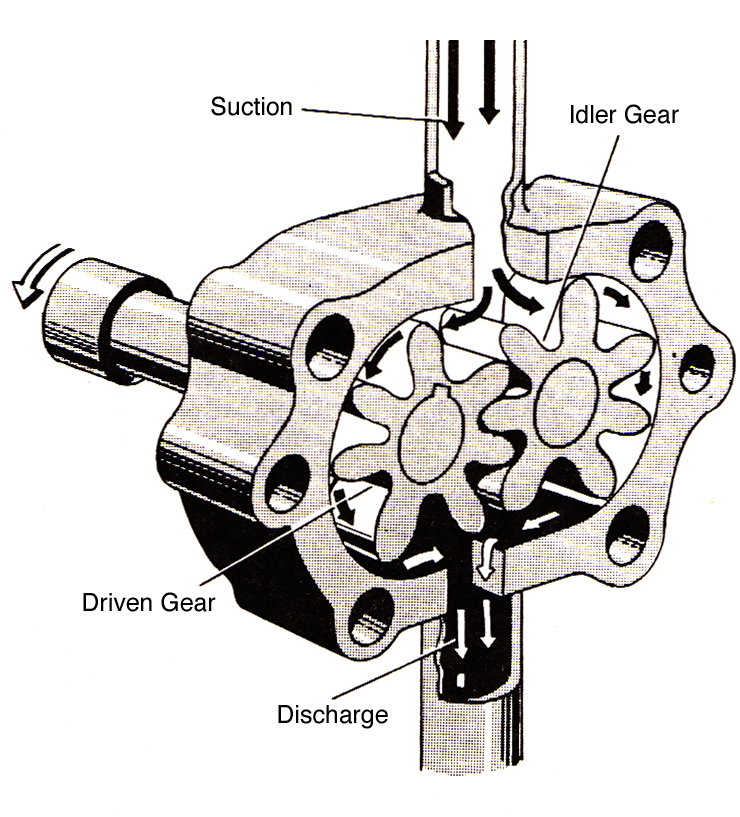
<style>
.page{position:relative;width:740px;height:817px;background:#ffffff}
.page>*{position:absolute;margin:0}
.t1{font:24.9px "Helvetica";color:#000000}
</style>
<div class="page">
<p class="t1" style="left:211px;top:96px;width:81px;height:20px">Suction</p>
<p class="t1" style="left:571px;top:104px;width:108px;height:20px">Idler Gear</p>
<p class="t1" style="left:83px;top:592px;width:133px;height:20px">Driven Gear</p>
<p class="t1" style="left:278px;top:705px;width:110px;height:24px">Discharge</p>
</div>
